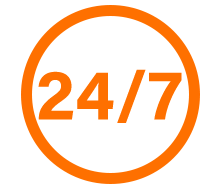
<style>
.page{position:relative;width:221px;height:188px;background:#ffffff}
.page>*{position:absolute;margin:0}
.t1{font:70.6px "AcuminConcept-Bold";color:#fe7000}
</style>
<div class="page">
<p class="t1" style="left:38px;top:69px;width:144px;height:54px">24/7</p>
</div>
